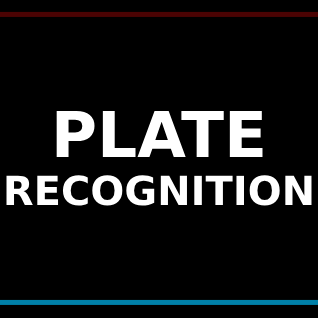
<style>
.page{position:relative;width:318px;height:318px;background:#000000}
.page>*{position:absolute;margin:0}
.t1{font:40px "DejaVuSans-Bold";color:#ffffff}
.t2{font:63px "DejaVuSans-Bold";color:#ffffff}
</style>
<div class="page">
<p class="t1" style="left:6px;top:111px;width:306px;height:95px;text-align:center"><span class="t2">PLATE<br></span>RECOGNITION</p>
</div>
